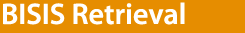
<style>
.page{position:relative;width:245px;height:33px;background:#e68d00}
.page>*{position:absolute;margin:0}
.t1{font:30px "MyriadPro-Semibold";color:#ffffff}
</style>
<div class="page">
<p class="t1" style="left:3px;top:2px;width:182px;height:23px">BISIS Retrieval</p>
</div>
